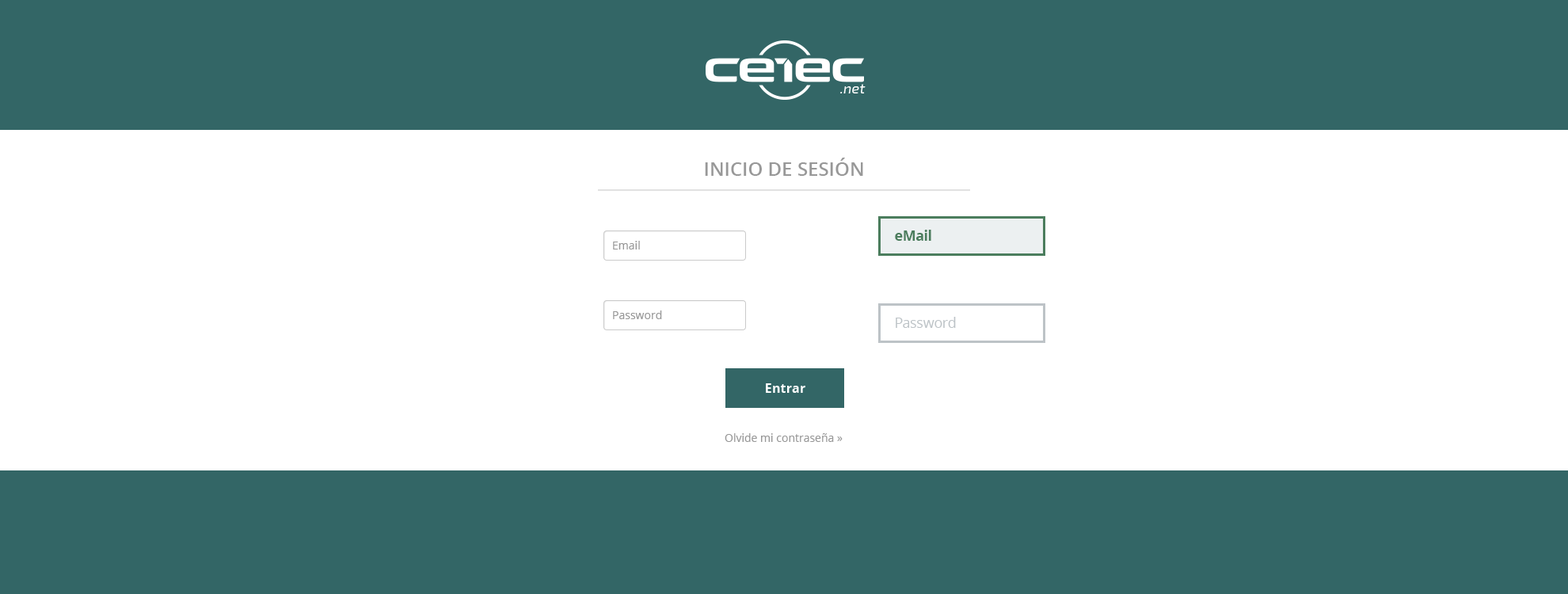
<style>
.page{position:relative;width:1568px;height:594px;background:#ffffff}
.page>*{position:absolute;margin:0}
.t1{font:19px "OpenSans-Semibold";color:#989898}
.t2{font:14.3px "OpenSans-Bold";letter-spacing:-0.02em;color:#4b7d5d}
.t3{font:11.1px "OpenSans";color:#989898}
.t4{font:14.3px "OpenSans";letter-spacing:-0.02em;color:#bdc3c7}
</style>
<div class="page">
<p class="t1" style="left:705px;top:158px;width:158px;height:18px">INICIO DE SESIÓN</p>
<p class="t2" style="left:895px;top:230px;width:36px;height:11px">eMail</p>
<p class="t3" style="left:613px;top:241px;width:27px;height:8px">Email</p>
<p class="t3" style="left:613px;top:310px;width:49px;height:9px">Password</p>
<p class="t4" style="left:896px;top:317px;width:60px;height:11px">Password</p>
<p class="t3" style="left:725px;top:433px;width:118px;height:9px">Olvide mi contraseña »</p>
</div>
